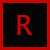
<style>
.page{position:relative;width:50px;height:50px;background:#040404}
.page>*{position:absolute;margin:0}
.t1{font:27.6px "LucidaGrande";color:#c70505}
</style>
<div class="page">
<p class="t1" style="left:17px;top:15px;width:16px;height:20px">R</p>
</div>
